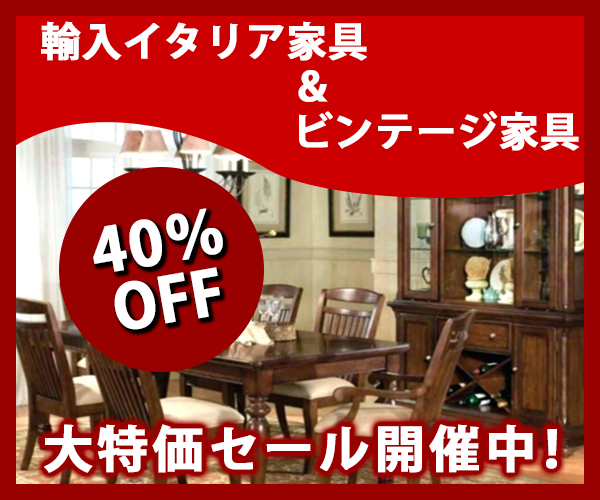
<style>
.page{position:relative;width:600px;height:500px;background:#cc0000}
.page>*{position:absolute;margin:0}
.t1{font:40px/45px "KozGoPr6N-Bold";color:#ffffff;font-weight:bold}
.t2{font:60px/60px "KozGoPr6N-Bold";letter-spacing:0.02em;color:#ffffff;font-weight:bold}
.t3{font:60px/60px "KozGoPr6N-Bold";color:#ffffff;font-weight:bold}
.t4{font:50px "KozGoPr6N-Bold";letter-spacing:0.08em;color:#ffffff;font-weight:bold}
.t5{font:50px "KozGoPr6N-Bold";letter-spacing:-0.2em;color:#ffffff;font-weight:bold}
</style>
<div class="page">
<p class="t1" style="left:41px;top:21px;width:538px;height:130px">輸入イタリア家具<br>                          ＆<br>                          ビンテージ家具</p>
<p class="t2" style="left:93px;top:208px;width:130px;height:122px;text-align:center;rotate:-10deg">40％<br><span class="t3">OFF</span></p>
<p class="t4" style="left:44px;top:424px;width:513px;height:49px">大特価セール開催<span class="t5">中</span>！</p>
</div>
